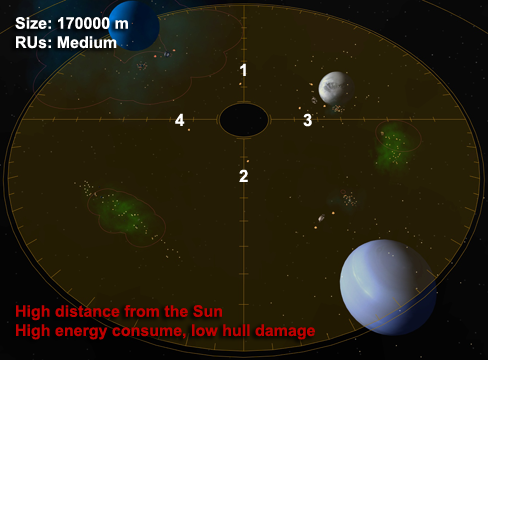
<style>
.page{position:relative;width:512px;height:512px;background:#ffffff}
.page>*{position:absolute;margin:0}
.t1{font:16px "Arial-BoldMT";color:#be0000}
.t2{font:16px "Arial-BoldMT";color:#ffffff}
.t3{font:17px "Arial-BoldMT";color:#ffffff}
</style>
<div class="page">
<p class="t1" style="left:15px;top:17px;width:300px;height:323px"><span class="t2">Size: 170000 m<br>RUs: Medium<br></span><br><br><br><br><br><br><br><br><br><br><br><br><br>High distance from the Sun<br>High energy consume, low hull damage</p>
<p class="t3" style="left:240px;top:63px;width:6px;height:13px">1</p>
<p class="t3" style="left:175px;top:113px;width:10px;height:13px">4</p>
<p class="t3" style="left:303px;top:113px;width:9px;height:14px">3</p>
<p class="t3" style="left:239px;top:169px;width:9px;height:13px">2</p>
</div>
